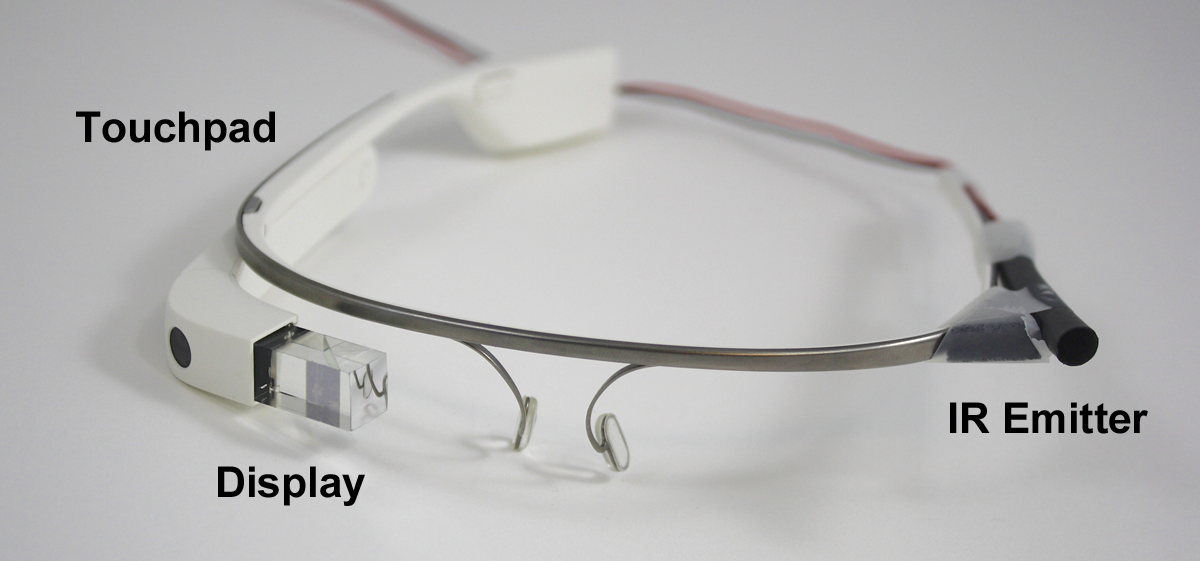
<style>
.page{position:relative;width:1200px;height:561px}
.page>*{position:absolute;margin:0}
.t1{font:42.4px "Arial-BoldMT";color:#000000}
</style>
<div class="page">
<p class="t1" style="left:76px;top:111px;width:199px;height:40px">Touchpad</p>
<p class="t1" style="left:950px;top:402px;width:198px;height:32px">IR Emitter</p>
<p class="t1" style="left:218px;top:466px;width:147px;height:40px">Display</p>
</div>
